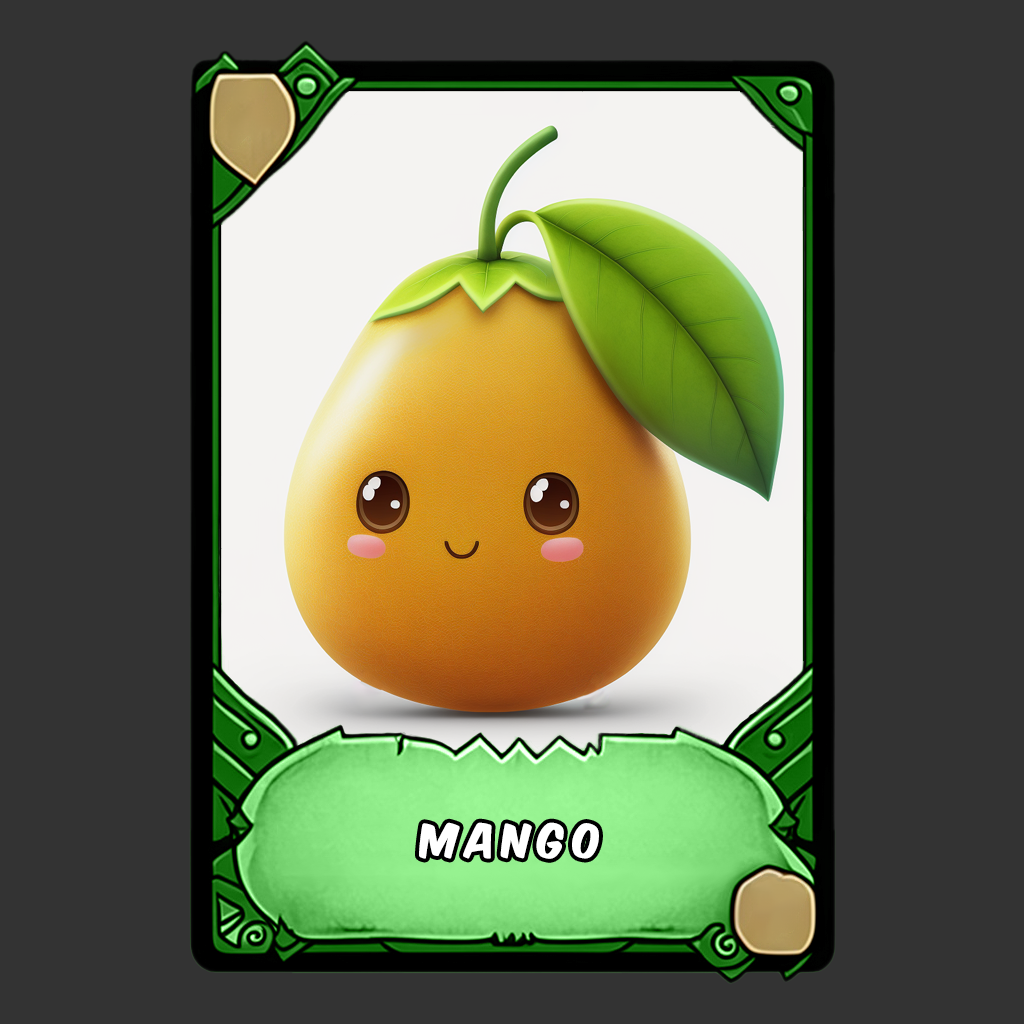
<style>
.page{position:relative;width:1024px;height:1024px;background:#333333}
.page>*{position:absolute;margin:0}
.t1{font:40px "KomikaAxis";letter-spacing:0.2em;color:#ffffff}
</style>
<div class="page">
<p class="t1" style="left:419px;top:822px;width:180px;height:37px">mango</p>
</div>
